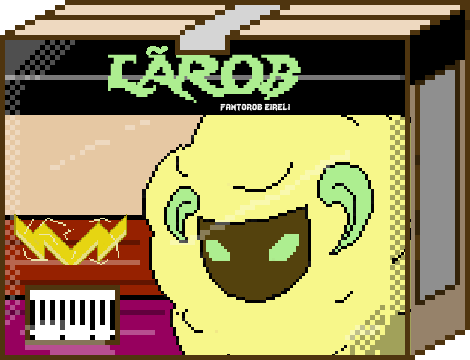
<style>
.page{position:relative;width:470px;height:360px;background:#f7f78a}
.page>*{position:absolute;margin:0}
.t1{font:48.3px "Lady-Radical";color:#adee90;scale:0.93 1}
.t2{font:12px "Lady-Radical";color:#fbfbfb}
</style>
<div class="page">
<p class="t1" style="left:108px;top:54px;width:193px;height:49px">LAROB</p>
<p class="t2" style="left:220px;top:103px;width:70px;height:8px">fantorob eireli</p>
</div>
